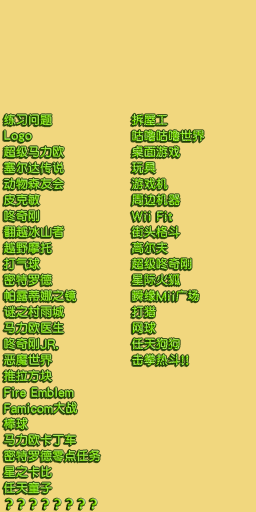
<style>
.page{position:relative;width:256px;height:512px;background:#f1d77e}
.page>*{position:absolute;margin:0}
.t1{font:12px/16px "DFPYuanW7";letter-spacing:0.02em}
.t2{font:14.7px/16px "DFPYuanW7";letter-spacing:0.02em;scale:0.9 1}
.t3{font:13.3px/16px "DFPYuanW7";letter-spacing:0.02em}
</style>
<div class="page">
<p class="t1" style="left:131px;top:113px;width:74px;height:253px">拆屋工<br>咕噜咕噜世界<br>桌面游戏<br>玩具<br>游戏机<br>周边机器<br><span class="t2">Wii Fit<br></span>街头格斗<br>高尔夫<br>超级咚奇刚<br>星际火狐<br>瞬缘<span class="t2">Mii</span>广场<br>打猎<br>网球<br>任天狗狗<br>击拳热斗<span class="t2">!!</span></p>
<p class="t1" style="left:3px;top:114px;width:98px;height:380px">练习问题<br><span class="t2">Logo<br></span>超级马力欧 <br>塞尔达传说 <br>动物森友会<br>皮克敏<br>咚奇刚<br>翻越冰山者<br>越野摩托<br>打气球<br>密特罗德<br>帕露蒂娜之镜<br>谜之村雨城<br>马力欧医生<br>咚奇刚<span class="t2">JR</span><span class="t3">.<br></span>恶魔世界<br>推拉方块<br><span class="t2">Fire Emblem<br>Famicom</span>大战<br>棒球<br>马力欧卡丁车<br>密特罗德零点任务<br>星之卡比<br>任天童子</p>
</div>
